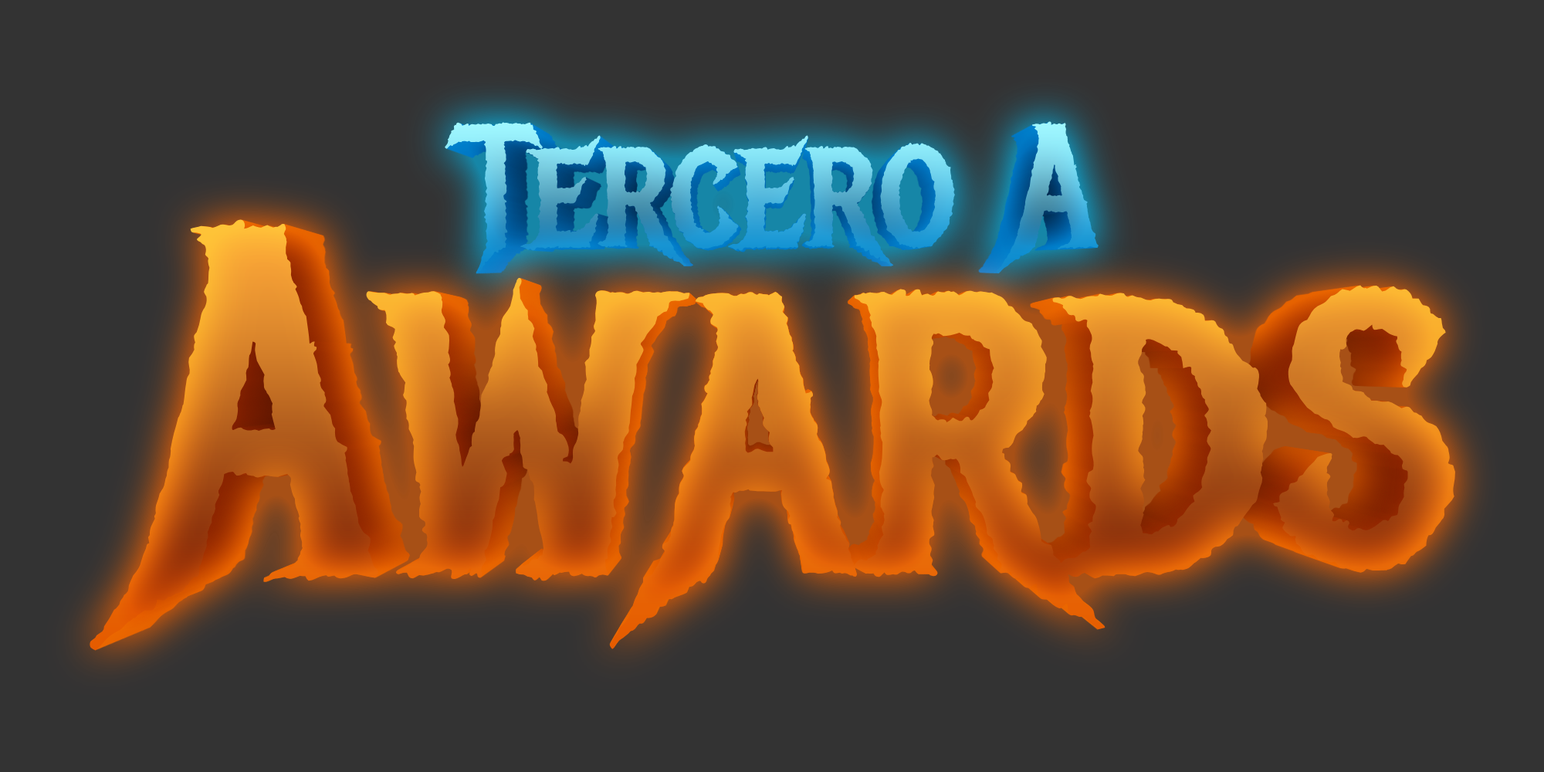
<style>
.page{position:relative;width:1544px;height:772px;background:#333333}
.page>*{position:absolute;margin:0}
.t1{font:171.3px "MetalMania-Regular"}
.t2{font:485.8px "MetalMania-Regular"}
</style>
<div class="page">
<p class="t1" style="left:445px;top:121px;width:654px;height:153px">Tercero A</p>
<p class="t2" style="left:90px;top:219px;width:1366px;height:432px">Awards</p>
</div>
